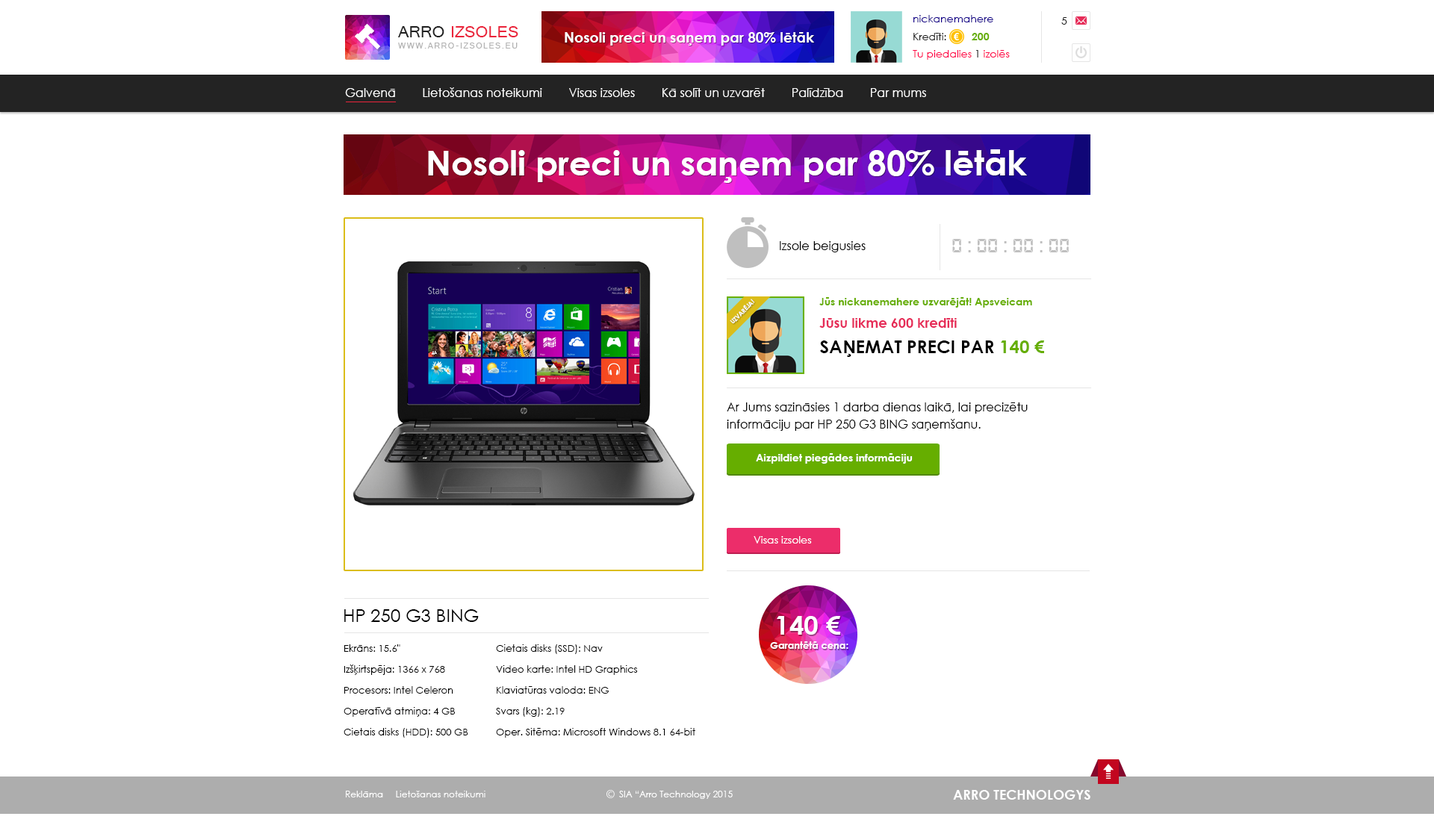
<style>
.page{position:relative;width:1434px;height:831px;background:#ffffff}
.page>*{position:absolute;margin:0}
.t1{font:10.5px "CenturyGothic";color:#17058b}
.t2{font:10.5px "CenturyGothic";color:#232323}
.t3{font:17.9px "Raavi";color:#ea243b;text-transform:uppercase}
.t4{font:17.9px "Raavi";color:#212121;text-transform:uppercase}
.t5{font:14.2px "CenturyGothic-Bold";color:#ffffff}
.t6{font:10.5px "CenturyGothic-Bold";color:#66ae00}
.t7{font:9px "Raavi";letter-spacing:0.12em;color:#b2b2b2;text-transform:uppercase}
.t8{font:10.5px "CenturyGothic";color:#ff0047}
.t9{font:12px "CenturyGothic";color:#ffffff}
.t10{font:34.1px "CenturyGothic-Bold";color:#ffffff}
.t11{font:12px "CenturyGothic";color:#000000}
.t12{font:20.9px "DS-Digital-Bold";color:#bfbfbf}
.t13{font:6px "CenturyGothic-Bold";color:#ffffff;text-transform:uppercase}
.t14{font:13.4px "CenturyGothic-Bold";color:#e62c58}
.t15{font:17.9px "CenturyGothic-Bold";color:#000000;text-transform:uppercase}
.t16{font:17.9px "CenturyGothic-Bold";color:#66ae00;text-transform:uppercase}
.t17{font:12px/17.2px "CenturyGothic";color:#000000}
.t18{font:10.5px "CenturyGothic-Bold";color:#ffffff}
.t19{font:10.5px "CenturyGothic";color:#ffffff}
.t20{font:17.9px "CenturyGothic";color:#000000}
.t21{font:26.1px "CenturyGothic-Bold";color:#ffffff}
.t22{font:9.7px "CenturyGothic-Bold";color:#ffffff}
.t23{font:9.7px/20.9px "CenturyGothic";color:#000000}
.t24{font:9px "CenturyGothic";color:#ffffff}
.t25{font:13.4px "CenturyGothic-Bold";color:#ffffff;text-transform:uppercase}
</style>
<div class="page">
<p class="t1" style="left:914px;top:15px;width:80px;height:7px">nickanemahere</p>
<p class="t2" style="left:1061px;top:17px;width:6px;height:8px">5</p>
<p class="t3" style="left:398px;top:26px;width:120px;height:11px"><span class="t4">Arro </span>Izsoles</p>
<p class="t5" style="left:565px;top:32px;width:249px;height:14px">Nosoli preci un saņem par 80% lētāk</p>
<p class="t2" style="left:914px;top:33px;width:32px;height:7px">Kredīti:</p>
<p class="t6" style="left:972px;top:33px;width:18px;height:7px">200</p>
<p class="t7" style="left:398px;top:43px;width:120px;height:6px">www.arro-izsoles.eu</p>
<p class="t8" style="left:913px;top:50px;width:97px;height:10px">Tu piedalies <span class="t2">1</span> izolēs</p>
<p class="t9" style="left:345px;top:87px;width:581px;height:10px">Galvenā        Lietošanas noteikumi        Visas izsoles        Kā solīt un uzvarēt        Palīdzība        Par mums</p>
<p class="t10" style="left:428px;top:149px;width:599px;height:34px">Nosoli preci un saņem par 80% lētāk</p>
<p class="t11" style="left:780px;top:241px;width:86px;height:11px">Izsole beigusies</p>
<p class="t12" style="left:952px;top:239px;width:117px;height:13px">0 : 00 : 00 : 00</p>
<p class="t13" style="left:730px;top:299px;width:25px;height:25px;rotate:-45deg">Uzvarēja!</p>
<p class="t6" style="left:819px;top:297px;width:213px;height:11px">Jūs nickanemahere uzvarējāt! Apsveicam</p>
<p class="t14" style="left:819px;top:318px;width:138px;height:10px">Jūsu likme 600 kredīti</p>
<p class="t15" style="left:820px;top:341px;width:224px;height:16px">Saņemat preci par <span class="t16">140 €</span></p>
<p class="t17" style="left:727px;top:403px;width:301px;height:28px">Ar Jums sazināsies 1 darba dienas laikā, lai precizētu <br>informāciju par HP 250 G3 BING saņemšanu.</p>
<p class="t18" style="left:756px;top:453px;width:157px;height:11px">Aizpildiet piegādes informāciju</p>
<p class="t19" style="left:754px;top:536px;width:58px;height:8px">Visas izsoles</p>
<p class="t20" style="left:344px;top:610px;width:135px;height:12px">HP 250 G3 BING</p>
<p class="t21" style="left:777px;top:616px;width:63px;height:19px">140 €</p>
<p class="t22" style="left:770px;top:642px;width:79px;height:7px">Garantētā cena:</p>
<p class="t23" style="left:344px;top:645px;width:124px;height:93px">Ekrāns: 15.6" <br>Izšķirtspēja: 1366 x 768<br>Procesors: Intel Celeron <br>Operatīvā atmiņa: 4 GB<br>Cietais disks (HDD): 500 GB</p>
<p class="t23" style="left:496px;top:645px;width:199px;height:93px">Cietais disks (SSD): Nav<br>Video karte: Intel HD Graphics <br>Klaviatūras valoda: ENG<br>Svars (kg): 2.19 <br>Oper. Sitēma: Microsoft Windows 8.1 64-bit</p>
<p class="t24" style="left:346px;top:791px;width:140px;height:7px">Reklāma     Lietošanas noteikumi</p>
<p class="t24" style="left:619px;top:791px;width:114px;height:8px">SIA “Arro Technology 2015</p>
<p class="t25" style="left:953px;top:790px;width:138px;height:10px">Arro Technologys</p>
</div>
